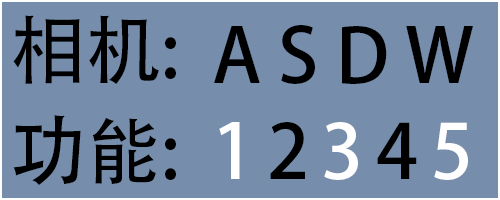
<style>
.page{position:relative;width:500px;height:200px;background:#768dac}
.page>*{position:absolute;margin:0}
.t1{font:75px "AdobeHeitiStd-Regular";color:#000000}
.t2{font:75px "AdobeHeitiStd-Regular";color:#ffffff}
</style>
<div class="page">
<p class="t1" style="left:13px;top:15px;width:163px;height:69px">相机:</p>
<p class="t1" style="left:214px;top:25px;width:259px;height:59px">A S D W</p>
<p class="t1" style="left:13px;top:115px;width:163px;height:70px">功能:</p>
<p class="t2" style="left:219px;top:122px;width:249px;height:58px">1    3    5</p>
<p class="t1" style="left:270px;top:122px;width:147px;height:57px">2    4</p>
</div>
